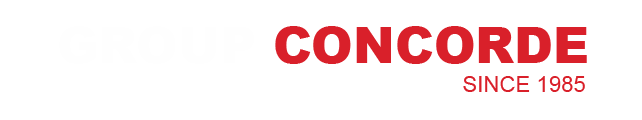
<style>
.page{position:relative;width:642px;height:120px;background:#ffffff}
.page>*{position:absolute;margin:0}
.t1{font:50px "Arial-Black";color:#d9202a}
.t2{font:22px "ArialMT";letter-spacing:0.005em;color:#d9202a}
</style>
<div class="page">
<p class="t1" style="left:275px;top:26px;width:312px;height:38px">CONCORDE</p>
<p class="t2" style="left:463px;top:76px;width:122px;height:16px">SINCE 1985</p>
</div>
